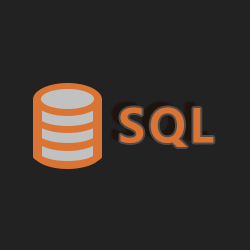
<style>
.page{position:relative;width:250px;height:250px;background:#222222}
.page>*{position:absolute;margin:0}
.t1{font:48px "MalgunGothicBold";letter-spacing:0.075em;color:#db7432;font-variant:small-caps}
</style>
<div class="page">
<p class="t1" style="left:120px;top:107px;width:94px;height:40px">SQL</p>
</div>
